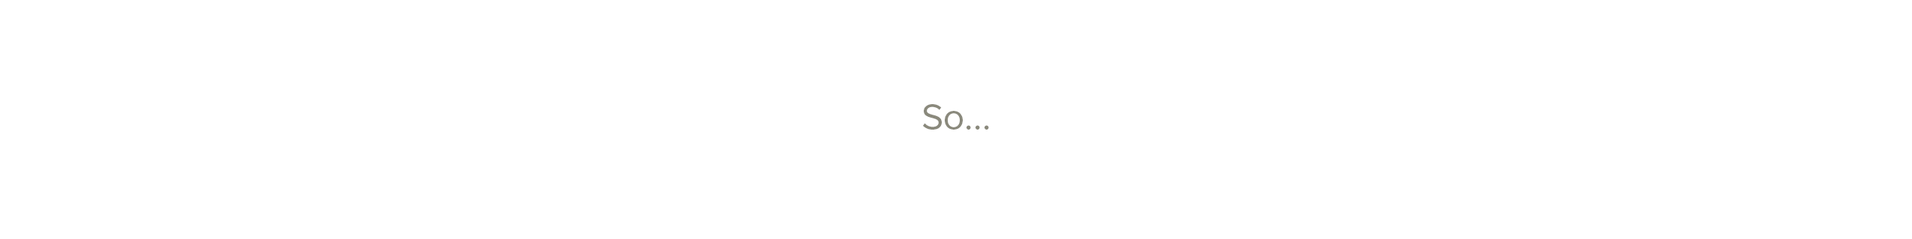
<style>
.page{position:relative;width:1912px;height:239px;background:#ffffff}
.page>*{position:absolute;margin:0}
.t1{font:9px "ProximaNova-Regular";color:#8a897c}
</style>
<div class="page">
<p class="t1" style="left:923px;top:104px;width:66px;height:26px;text-align:center">So...</p>
</div>
